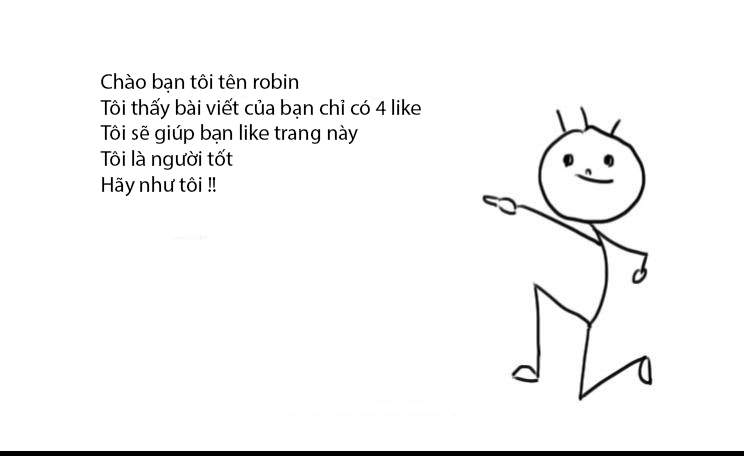
<style>
.page{position:relative;width:744px;height:456px;background:#ffffff}
.page>*{position:absolute;margin:0}
.t1{font:21.3px "MyriadPro-Regular";color:#000000}
</style>
<div class="page">
<p class="t1" style="left:100px;top:73px;width:321px;height:124px">Chào bạn tôi tên robin<br>Tôi thấy bài viết của bạn chỉ có 4 like<br>Tôi sẽ giúp bạn like trang này<br>Tôi là người tốt<br>Hãy như tôi !!</p>
</div>
